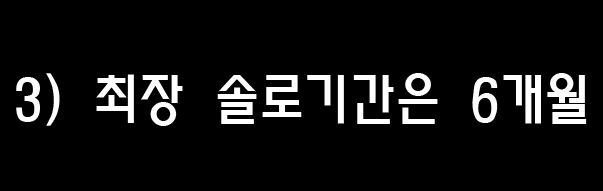
<style>
.page{position:relative;width:603px;height:191px;background:#000000}
.page>*{position:absolute;margin:0}
.t1{font:55px "MoeumTR-HM";color:#ffffff}
</style>
<div class="page">
<p class="t1" style="left:16px;top:73px;width:571px;height:53px">3) 최장 솔로기간은 6개월</p>
</div>
